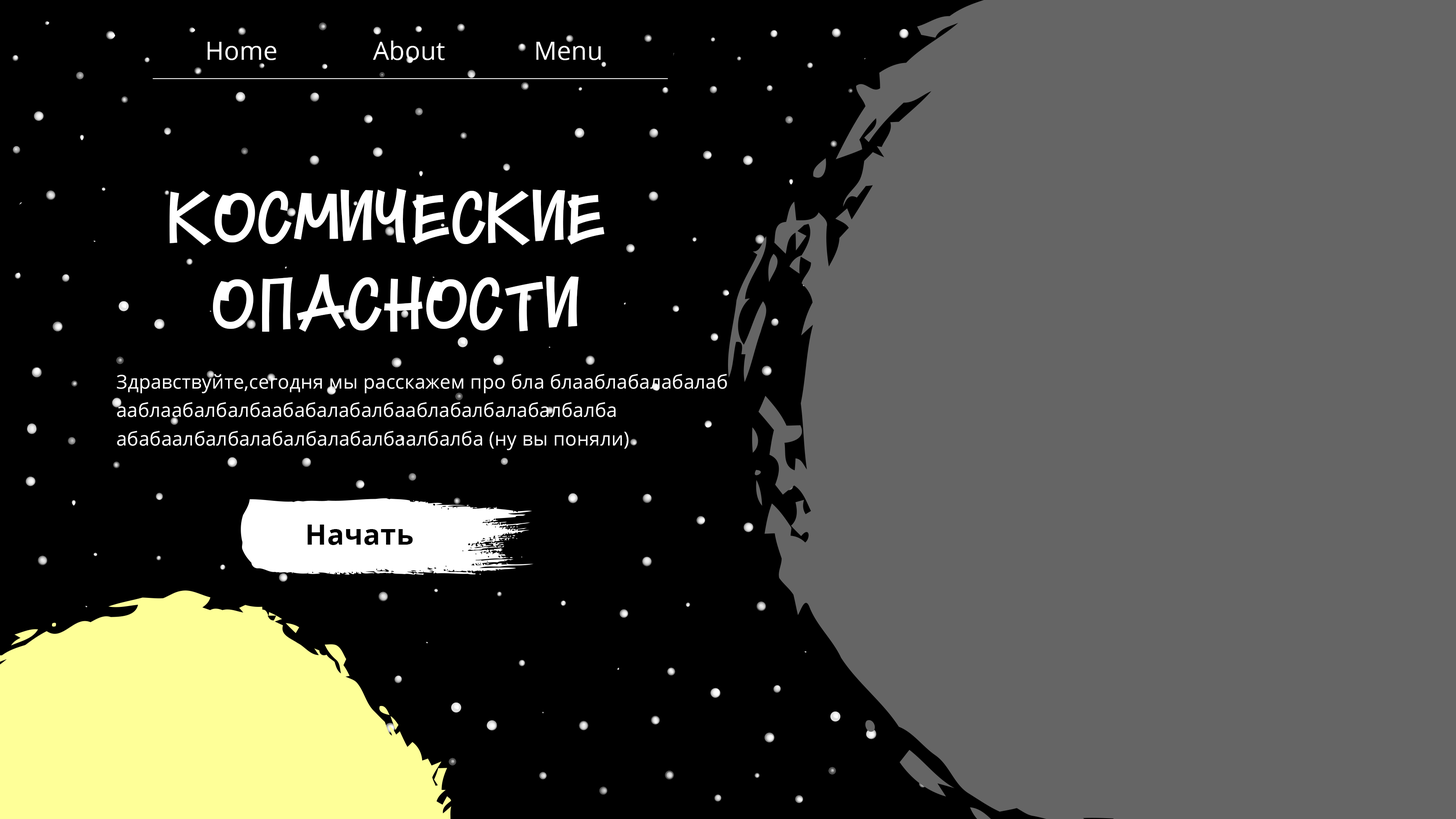
<style>
.page{position:relative;width:1456px;height:819px;background:#000000}
.page>*{position:absolute;margin:0}
.t1{font:25.2px "OpenSans-Regular";letter-spacing:0.01em;color:#ffffff}
.t2{font:71.9px "MarkyMarkerNFW01-Regularrusby";letter-spacing:0.01em;color:#ffffff}
.t3{font:19.2px/28.4px "OpenSans";letter-spacing:0.01em;color:#fefefe}
.t4{font:28.2px "OpenSans-Bold";letter-spacing:0.01em;color:#000000}
</style>
<div class="page">
<p class="t1" style="left:208px;top:41px;width:393px;height:19px">Home              About             Menu</p>
<p class="t2" style="left:170px;top:188px;width:434px;height:144px;text-align:center">Космические <br>опасности</p>
<p class="t3" style="left:117px;top:374px;width:610px;height:76px">Здравствуйте,сегодня мы расскажем про бла блааблабалабалаб<br>ааблаабалбалбаабабалабалбааблабалбалабалбалба<br>абабаалбалбалабалбалабалбаалбалба (ну вы поняли)</p>
<p class="t4" style="left:308px;top:525px;width:105px;height:20px">Начать</p>
</div>
